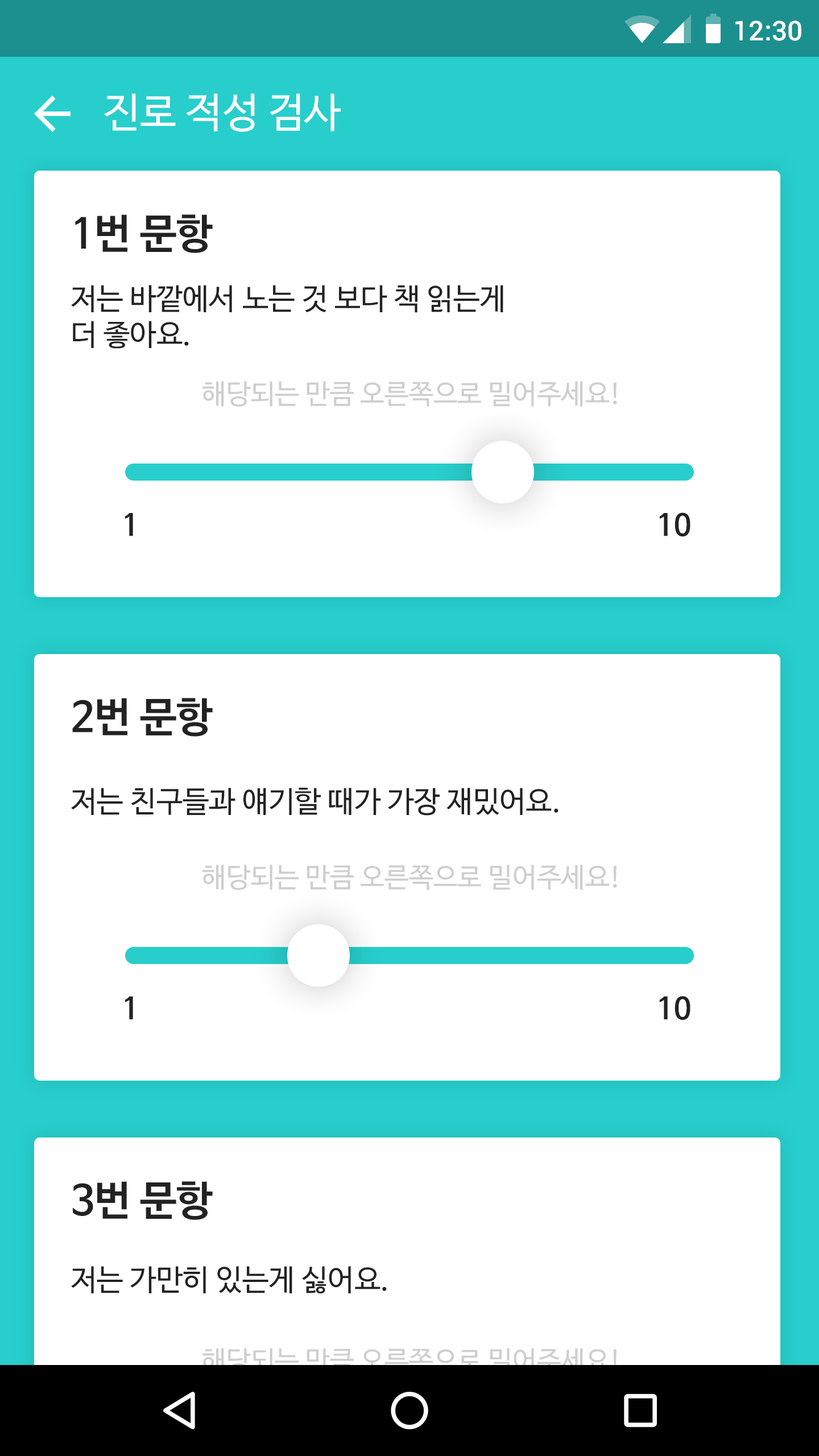
<style>
.page{position:relative;width:819px;height:1456px;background:#ffffff}
.page>*{position:absolute;margin:0}
.t1{font:27.3px "Roboto-Medium";color:#ffffff}
.t2{font:40.9px "NanumBarunGothic";color:#ffffff}
.t3{font:40.9px "NanumBarunGothicBold";color:#222222}
.t4{font:29.6px "NanumBarunGothic";color:#222222}
.t5{font:27.3px "NanumBarunGothic";color:#cecece}
.t6{font:29.6px "NanumBarunGothicBold";color:#222222}
</style>
<div class="page">
<p class="t1" style="left:735px;top:20px;width:66px;height:21px">12:30</p>
<p class="t2" style="left:104px;top:93px;width:237px;height:39px">진로 적성 검사</p>
<p class="t3" style="left:75px;top:214px;width:138px;height:39px">1번 문항</p>
<p class="t4" style="left:71px;top:285px;width:432px;height:64px">저는 바깥에서 노는 것 보다 책 읽는게<br>더 좋아요.</p>
<p class="t5" style="left:202px;top:381px;width:415px;height:26px">해당되는 만큼 오른쪽으로 밀어주세요!</p>
<p class="t6" style="left:125px;top:513px;width:8px;height:23px">1</p>
<p class="t6" style="left:659px;top:512px;width:31px;height:25px">10</p>
<p class="t3" style="left:72px;top:698px;width:141px;height:39px">2번 문항</p>
<p class="t4" style="left:71px;top:788px;width:488px;height:28px">저는 친구들과 얘기할 때가 가장 재밌어요.</p>
<p class="t5" style="left:202px;top:864px;width:415px;height:26px">해당되는 만큼 오른쪽으로 밀어주세요!</p>
<p class="t6" style="left:125px;top:996px;width:8px;height:24px">1</p>
<p class="t6" style="left:659px;top:996px;width:31px;height:24px">10</p>
<p class="t3" style="left:73px;top:1181px;width:140px;height:39px">3번 문항</p>
<p class="t4" style="left:71px;top:1266px;width:316px;height:28px">저는 가만히 있는게 싫어요.</p>
</div>
